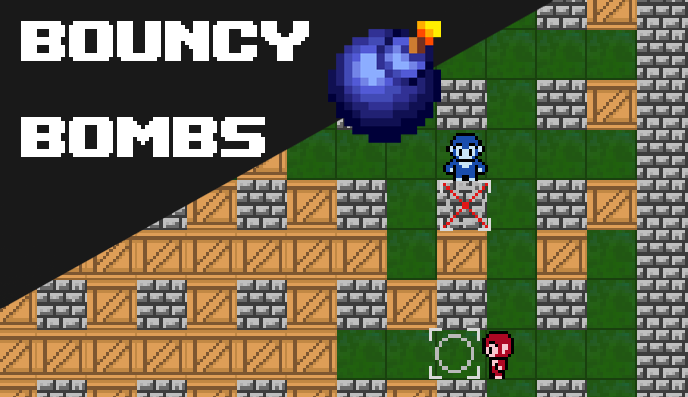
<style>
.page{position:relative;width:688px;height:397px;background:#191919}
.page>*{position:absolute;margin:0}
.t1{font:80px "UpheavalTT-BRK-";color:#ffffff}
</style>
<div class="page">
<p class="t1" style="left:21px;top:21px;width:288px;height:136px">BOUNCY<br>BOMBS</p>
</div>
